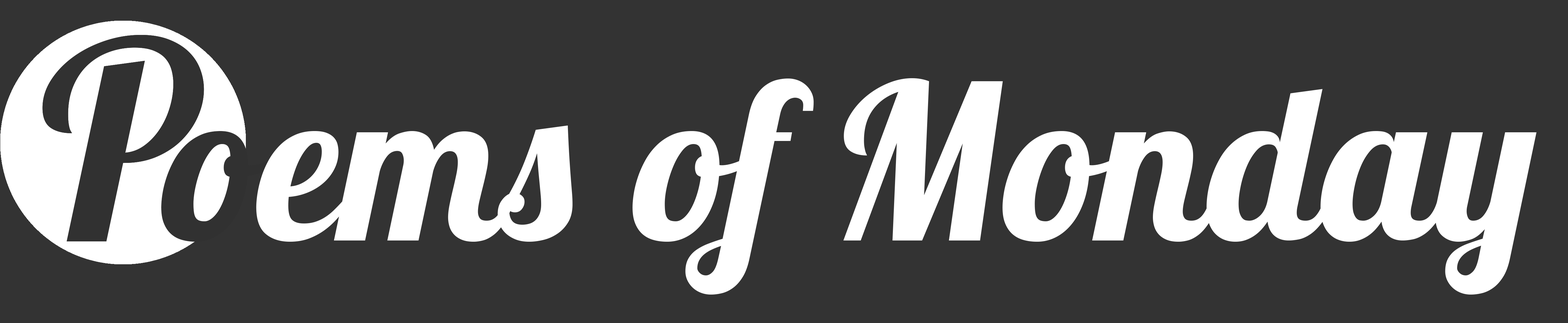
<style>
.page{position:relative;width:1568px;height:323px;background:#333333}
.page>*{position:absolute;margin:0}
.t1{font:216.2px "LobsterTwo-BoldItalic";color:#ffffff}
.t2{font:216.2px "LobsterTwo-BoldItalic";color:#313131}
</style>
<div class="page">
<p class="t1" style="left:161px;top:78px;width:1375px;height:216px"><span class="t2">o</span>ems of Monday</p>
</div>
